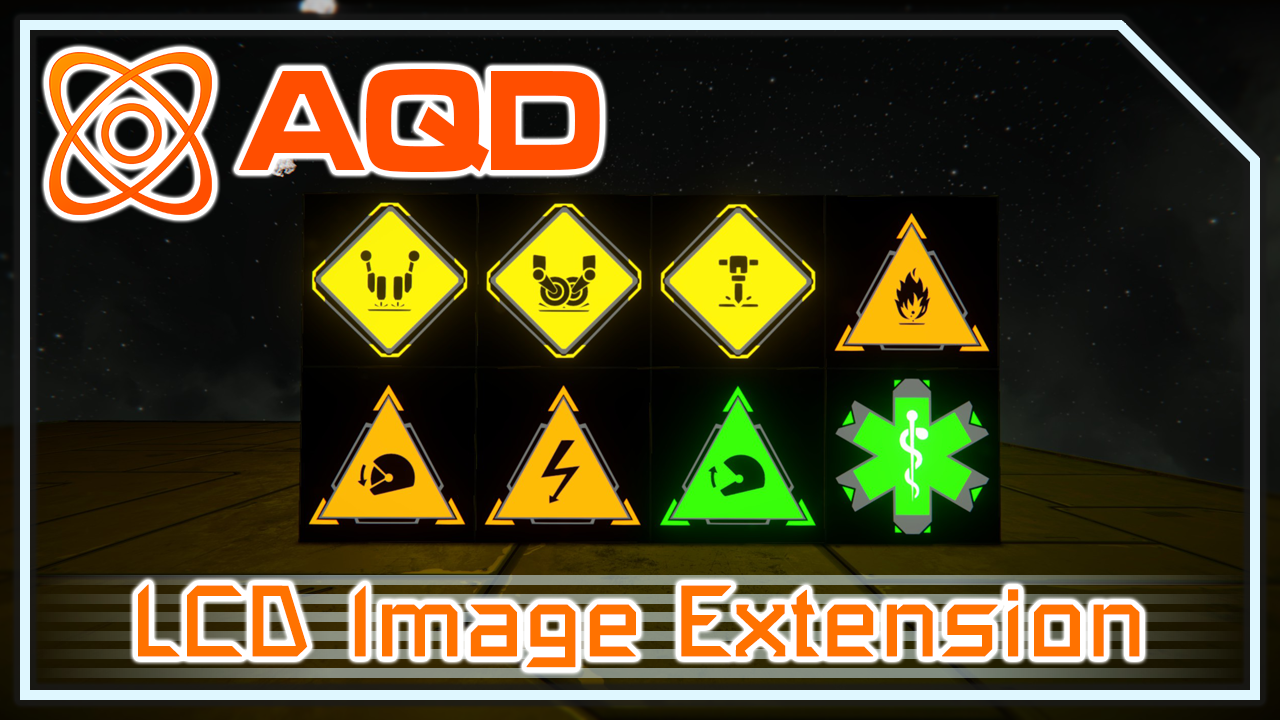
<style>
.page{position:relative;width:1280px;height:720px}
.page>*{position:absolute;margin:0}
.t1{font:148.7px "MicrogrammaD-BoldExte";color:#ff4e00;scale:0.83 1}
.t2{font:99px "SpaceEngineers";color:#ff7200;font-weight:bold}
</style>
<div class="page">
<p class="t1" style="left:238px;top:69px;width:362px;height:104px">AQD</p>
<p class="t2" style="left:138px;top:584px;width:1002px;height:84px">LCD Image Extension</p>
</div>
